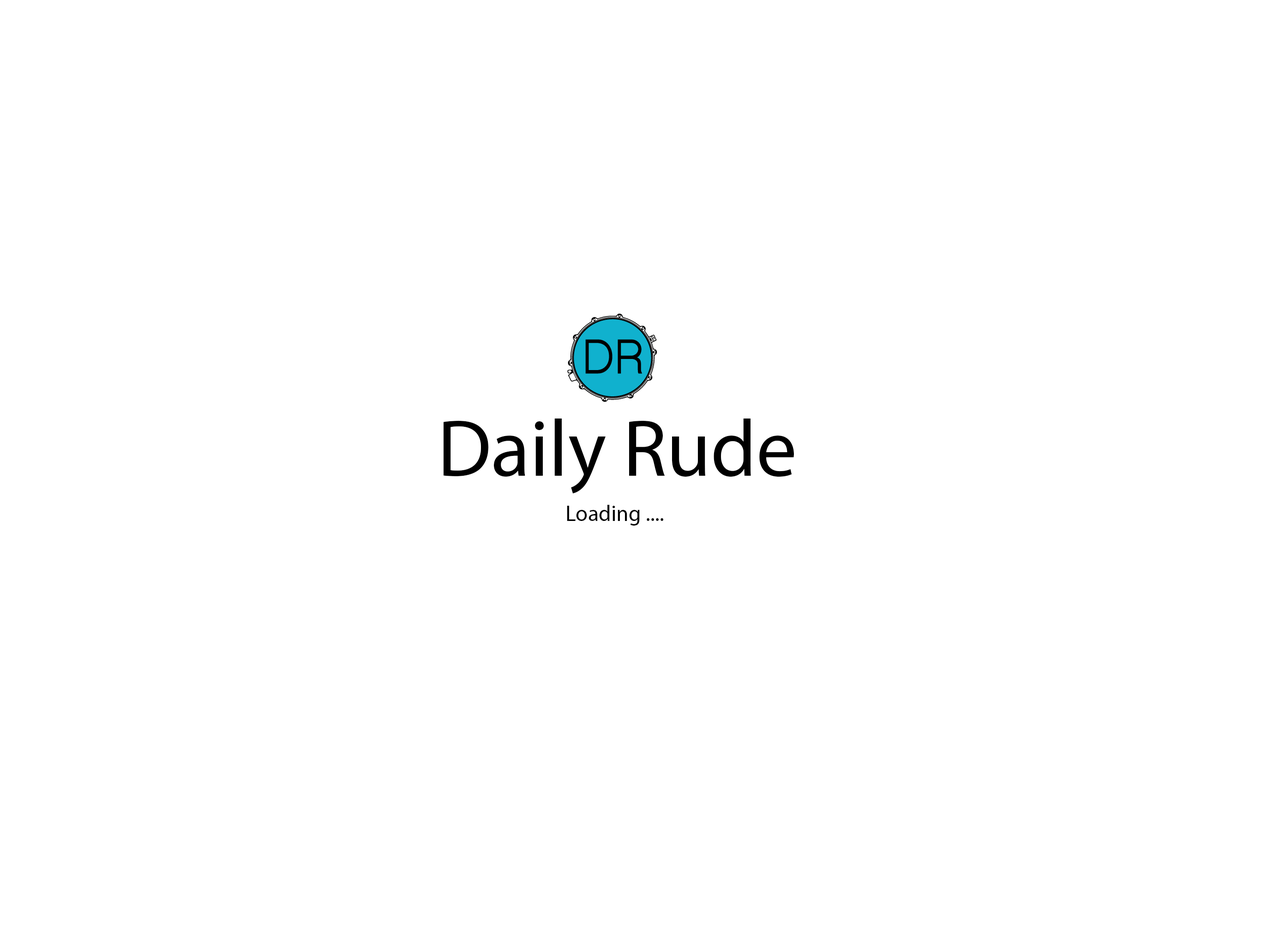
<style>
.page{position:relative;width:1261px;height:945px;background:#ffffff}
.page>*{position:absolute;margin:0}
.t1{font:80.7px "MyriadPro-Regular";color:#000000}
.t2{font:22.2px "MyriadPro-Regular";color:#000000}
</style>
<div class="page">
<p class="t1" style="left:444px;top:419px;width:350px;height:75px">Daily Rude</p>
<p class="t2" style="left:567px;top:505px;width:96px;height:21px">Loading ....</p>
</div>
